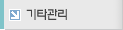
<style>
.page{position:relative;width:123px;height:30px;background:#e9e9e9}
.page>*{position:absolute;margin:0}
.t1{font:13px "ÈÆ¹ÎÃ¼M";letter-spacing:-0.025em;color:#444444;font-weight:bold;scale:0.8 1}
</style>
<div class="page">
<p class="t1" style="left:26px;top:9px;width:41px;height:11px">기타관리</p>
</div>
